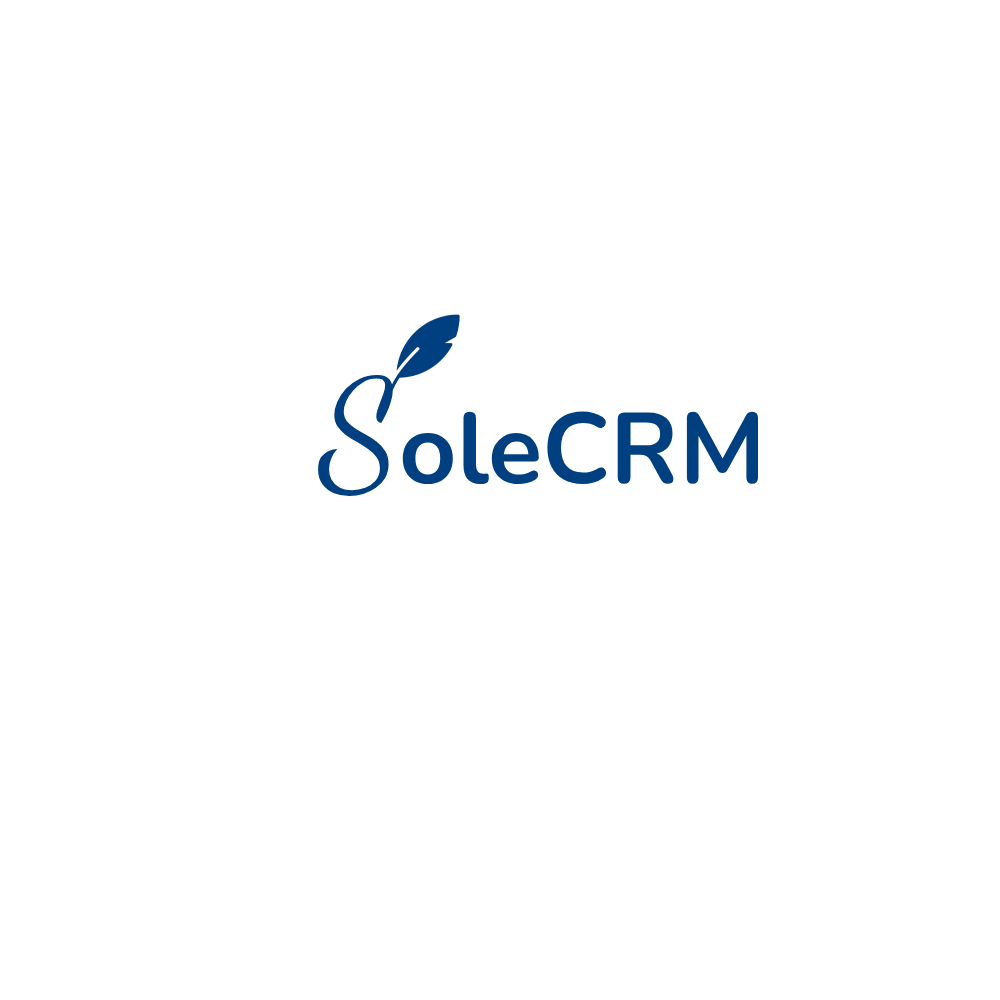
<style>
.page{position:relative;width:1000px;height:1000px;background:#ffffff}
.page>*{position:absolute;margin:0}
.t1{font:100px "Nunito-Bold";color:#004080}
.t2{font:150px "DancingScript-Regular";color:#004080}
</style>
<div class="page">
<p class="t1" style="left:318px;top:375px;width:440px;height:122px"><span class="t2">S</span>oleCRM</p>
</div>
